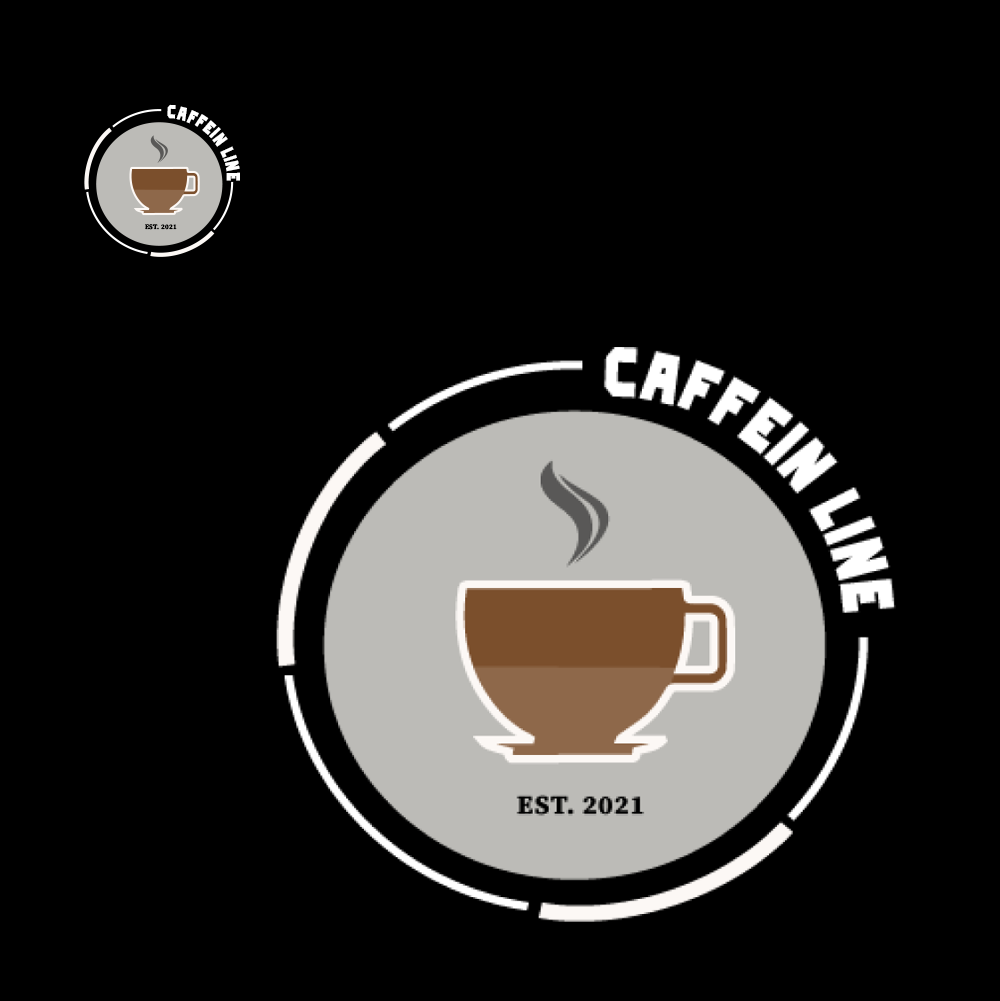
<style>
.page{position:relative;width:1000px;height:1001px;background:#000000}
.page>*{position:absolute;margin:0}
.t1{font:18.8px "Inlanders-Bold";letter-spacing:0.046em;color:#ffffff;scale:0.82 1}
.t2{font:6.8px "SourceSerifRoman-Bold";letter-spacing:0.046em;color:#000000}
</style>
<div class="page">
<p class="t1" style="left:167px;top:104px;width:73px;height:77px">CAFFEIN LINE</p>
<p class="t2" style="left:145px;top:224px;width:32px;height:6px">EST. 2021</p>
</div>
